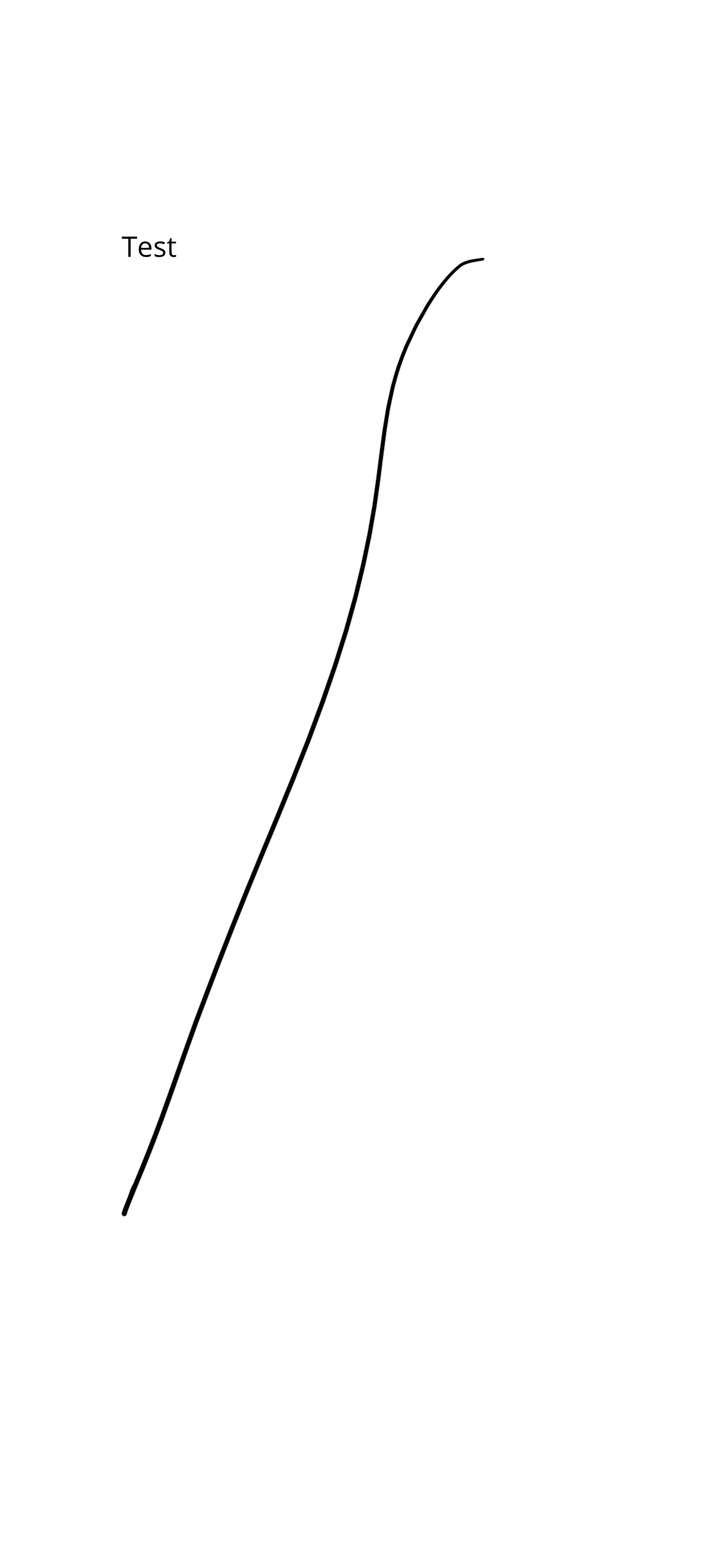
<style>
.page{position:relative;width:724px;height:1568px;background:#ffffff}
.page>*{position:absolute;margin:0}
.t1{font:28.3px "OpenSans";color:#000000}
</style>
<div class="page">
<p class="t1" style="left:122px;top:236px;width:54px;height:21px">Test</p>
</div>
